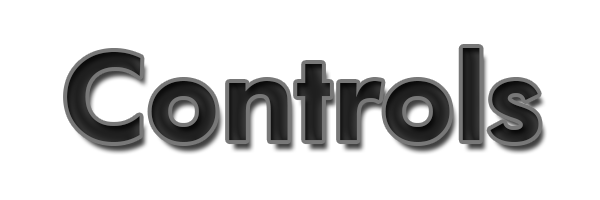
<style>
.page{position:relative;width:600px;height:200px;background:#ffffff}
.page>*{position:absolute;margin:0}
.t1{font:120px "FuturaBT-Heavy";color:#212121}
</style>
<div class="page">
<p class="t1" style="left:67px;top:48px;width:472px;height:94px">Controls</p>
</div>
